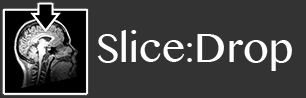
<style>
.page{position:relative;width:306px;height:98px;background:#333333}
.page>*{position:absolute;margin:0}
.t1{font:48px "KhmerMN";color:#ffffff}
</style>
<div class="page">
<p class="t1" style="left:97px;top:30px;width:195px;height:41px">Slice:Drop</p>
</div>
